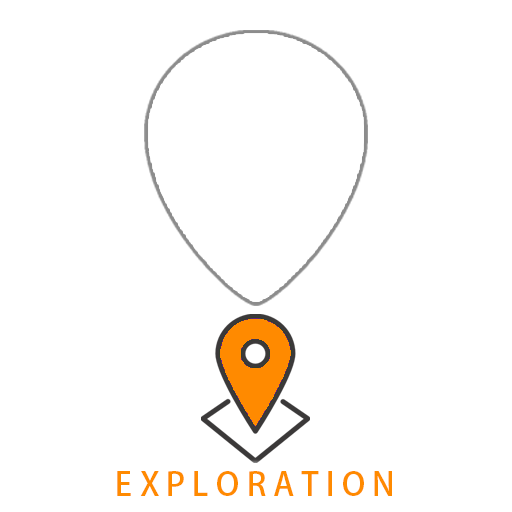
<style>
.page{position:relative;width:512px;height:512px;background:#ffffff}
.page>*{position:absolute;margin:0}
.t1{font:32.1px "AdobeFanHeitiStd-Bold";color:#ff8a00}
</style>
<div class="page">
<p class="t1" style="left:117px;top:471px;width:275px;height:25px">E X P L O R A T I O N</p>
</div>
